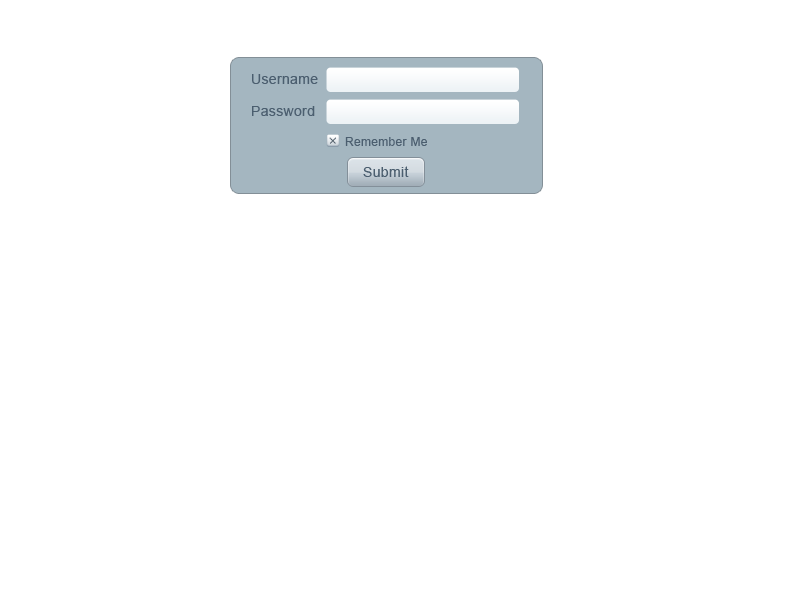
<style>
.page{position:relative;width:800px;height:600px;background:#ffffff}
.page>*{position:absolute;margin:0}
.t1{font:14px "ArialMT";letter-spacing:0.025em;color:#4b5e6f}
.t2{font:12px "ArialMT";letter-spacing:0.025em;color:#4b5e6f}
</style>
<div class="page">
<p class="t1" style="left:252px;top:74px;width:66px;height:10px">Username</p>
<p class="t1" style="left:252px;top:106px;width:63px;height:10px">Password</p>
<p class="t2" style="left:345px;top:137px;width:82px;height:9px">Remember Me</p>
<p class="t1" style="left:363px;top:166px;width:46px;height:11px">Submit</p>
</div>
